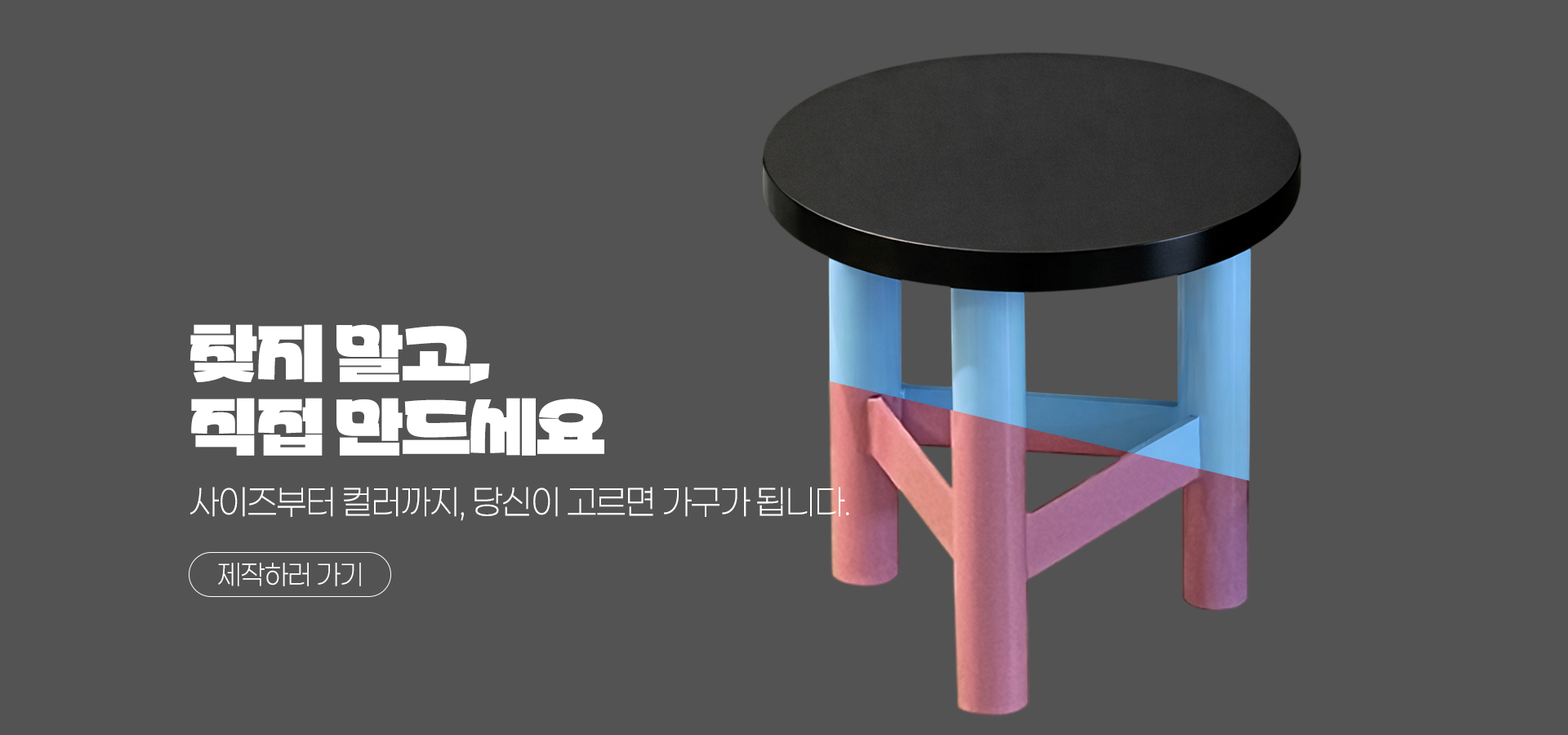
<style>
.page{position:relative;width:1568px;height:735px;background:#535353}
.page>*{position:absolute;margin:0}
.t1{font:61.2px "Partial-Sans-KR";letter-spacing:-0.02em;color:#ffffff}
.t2{font:34px "Paperlogy-2ExtraLight";letter-spacing:-0.02em;color:#ffffff}
.t3{font:27.2px "Paperlogy-2ExtraLight";letter-spacing:-0.02em;color:#ffffff}
</style>
<div class="page">
<p class="t1" style="left:190px;top:324px;width:414px;height:132px">찾지 말고,<br>직접 만드세요</p>
<p class="t2" style="left:190px;top:487px;width:659px;height:34px">사이즈부터 컬러까지, 당신이 고르면 가구가 됩니다.</p>
<p class="t3" style="left:218px;top:563px;width:143px;height:23px">제작하러 가기</p>
</div>
